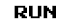
<style>
.page{position:relative;width:72px;height:24px;background:#ffffff}
.page>*{position:absolute;margin:0}
.t1{font:14px "PressStart2P-Regular";letter-spacing:0.04em;color:#000000}
</style>
<div class="page">
<p class="t1" style="left:14px;top:5px;width:42px;height:14px">RUN</p>
</div>
